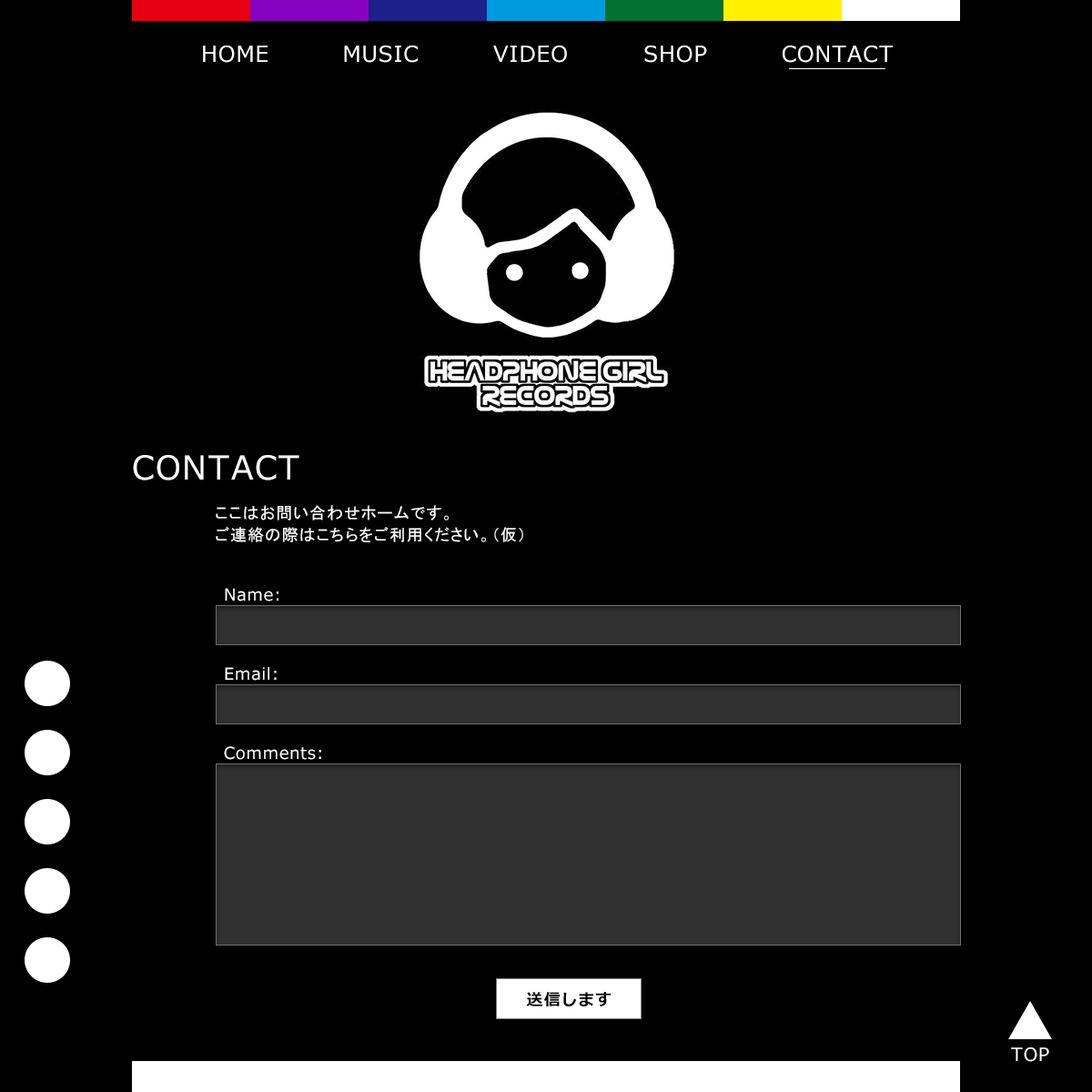
<style>
.page{position:relative;width:1092px;height:1092px;background:#000000}
.page>*{position:absolute;margin:0}
.t1{font:21.8px "Meiryo";letter-spacing:0.05em;color:#ffffff}
.t2{font:32.8px "Meiryo";letter-spacing:0.05em;color:#ffffff}
.t3{font:16.4px/21.8px "MS-PGothic";letter-spacing:0.05em;color:#ffffff}
.t4{font:16.4px "Meiryo";letter-spacing:0.05em;color:#ffffff}
.t5{font:16.4px "Meiryo-BoldItalic";letter-spacing:0.05em;color:#000000}
.t6{font:18.2px "Meiryo";letter-spacing:0.05em;color:#ffffff}
</style>
<div class="page">
<p class="t1" style="left:203px;top:45px;width:65px;height:18px">HOME</p>
<p class="t1" style="left:344px;top:45px;width:74px;height:18px">MUSIC</p>
<p class="t1" style="left:493px;top:45px;width:74px;height:18px">VIDEO</p>
<p class="t1" style="left:644px;top:45px;width:63px;height:18px">SHOP</p>
<p class="t1" style="left:783px;top:45px;width:110px;height:18px">CONTACT</p>
<p class="t2" style="left:133px;top:455px;width:166px;height:25px">CONTACT</p>
<p class="t3" style="left:216px;top:505px;width:307px;height:37px">ここはお問い合わせホームです。<br>ご連絡の際はこちらをご利用ください。（仮）</p>
<p class="t4" style="left:225px;top:588px;width:53px;height:14px">Name:</p>
<p class="t4" style="left:225px;top:667px;width:52px;height:14px">Email:</p>
<p class="t4" style="left:224px;top:746px;width:97px;height:14px">Comments:</p>
<p class="t5" style="left:526px;top:992px;width:86px;height:14px">送信します</p>
<p class="t6" style="left:1011px;top:1047px;width:38px;height:15px">TOP</p>
</div>
